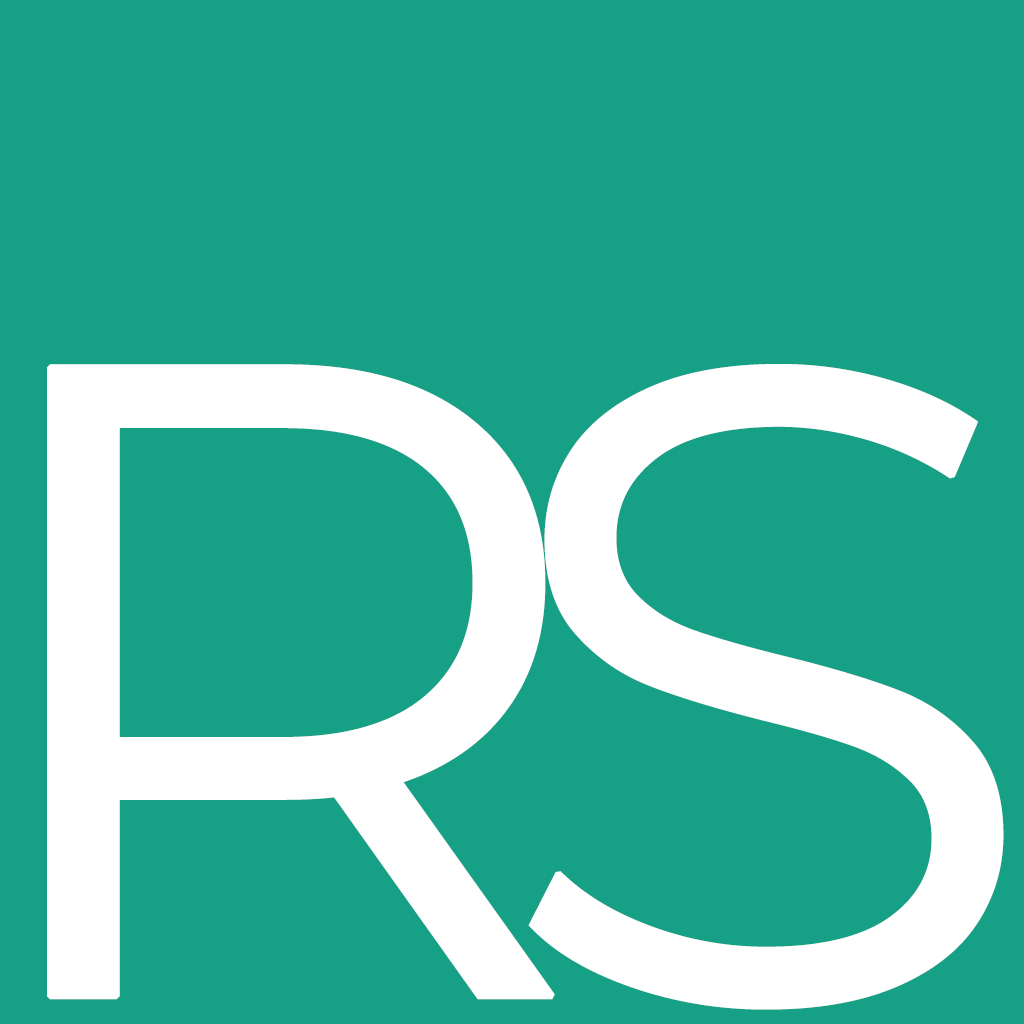
<style>
.page{position:relative;width:1024px;height:1024px;background:#16a085}
.page>*{position:absolute;margin:0}
.t1{font:898px "Montserrat-Regular";color:#ffffff;text-transform:uppercase;font-weight:bold}
</style>
<div class="page">
<p class="t1" style="left:47px;top:364px;width:508px;height:636px">R</p>
<p class="t1" style="left:528px;top:364px;width:476px;height:646px">s</p>
</div>
